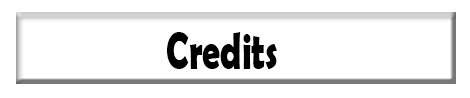
<style>
.page{position:relative;width:470px;height:98px;background:#ffffff}
.page>*{position:absolute;margin:0}
.t1{font:52.3px "BerlinSansFBDemi-Bold";color:#000000;scale:0.69 1}
</style>
<div class="page">
<p class="t1" style="left:167px;top:32px;width:110px;height:37px">Credits</p>
</div>
